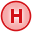
<style>
.page{position:relative;width:32px;height:32px;background:#ffffff}
.page>*{position:absolute;margin:0}
.t1{font:18.8px "Arial-BoldMT";color:#d31218}
</style>
<div class="page">
<p class="t1" style="left:11px;top:9px;width:11px;height:14px">Н</p>
</div>
